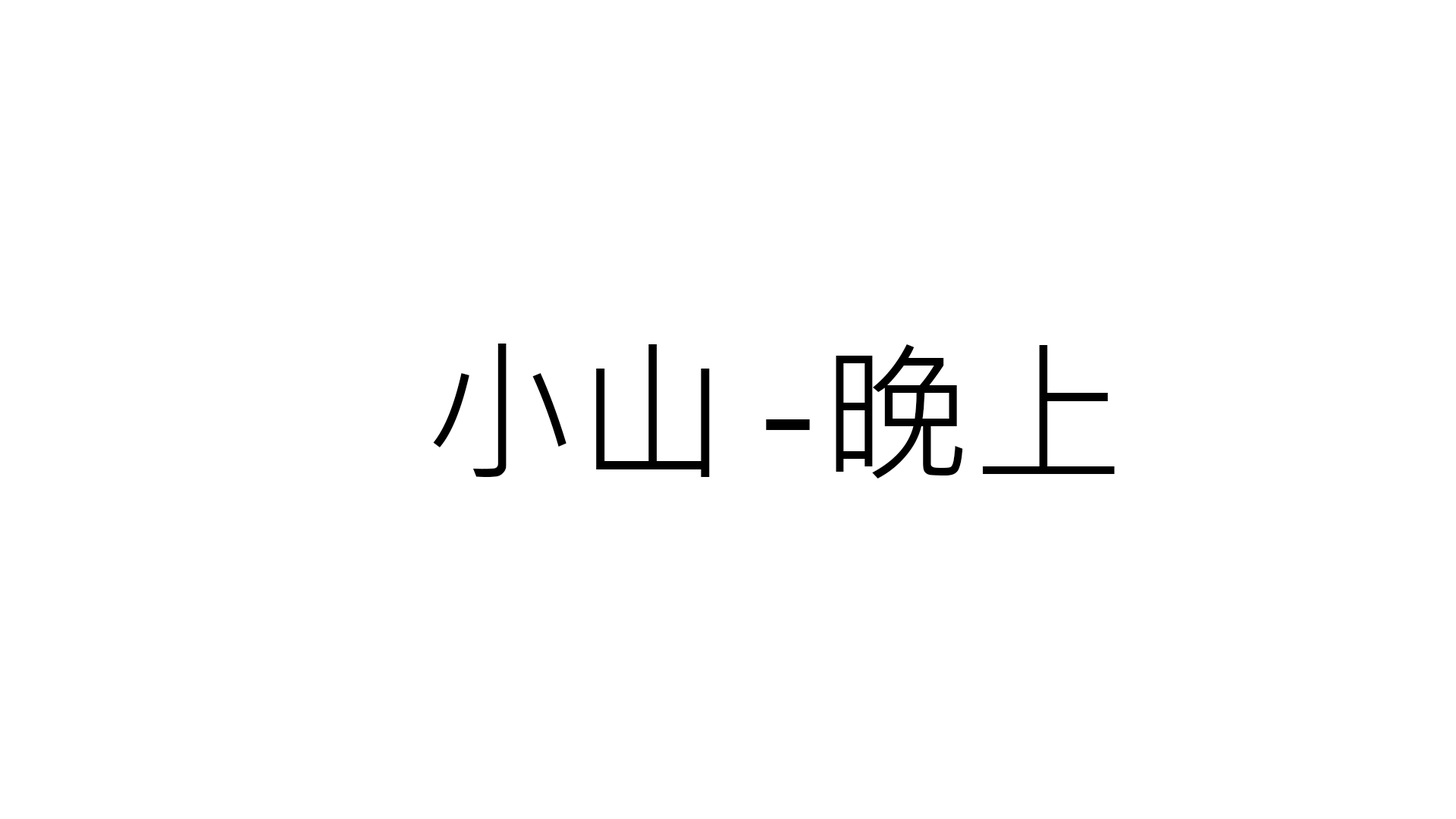
<style>
.page{position:relative;width:1456px;height:819px;background:#ffffff}
.page>*{position:absolute;margin:0}
.t1{font:151.7px "MicrosoftJhengHeiRegular";color:#000000}
</style>
<div class="page">
<p class="t1" style="left:433px;top:344px;width:277px;height:133px">小山</p>
<p class="t1" style="left:766px;top:344px;width:349px;height:135px">-晚上</p>
</div>
